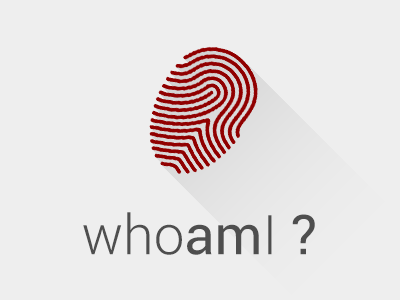
<style>
.page{position:relative;width:400px;height:300px;background:#eeeeee}
.page>*{position:absolute;margin:0}
.t1{font:55px "Roboto-Light";color:#4e4e4e}
.t2{font:55px "Roboto-Regular";color:#4e4e4e}
</style>
<div class="page">
<p class="t1" style="left:83px;top:212px;width:232px;height:43px">who<span class="t2">am</span>I<span class="t2"> ?</span></p>
</div>
